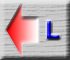
<style>
.page{position:relative;width:70px;height:60px}
.page>*{position:absolute;margin:0}
.t1{font:24px "Arial-BoldMT"}
</style>
<div class="page">
<p class="t1" style="left:47px;top:21px;width:13px;height:18px">L</p>
</div>
